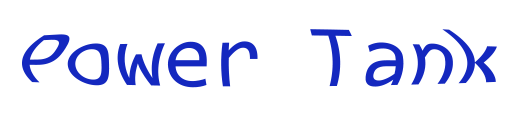
<style>
.page{position:relative;width:512px;height:128px;background:#ffffff}
.page>*{position:absolute;margin:0}
.t1{font:72px "Consolas";color:#1428bf}
</style>
<div class="page">
<p class="t1" style="left:22px;top:29px;width:475px;height:59px">Power Tank</p>
</div>
